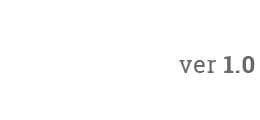
<style>
.page{position:relative;width:260px;height:120px;background:#ffffff}
.page>*{position:absolute;margin:0}
.t1{font:24px "RobotoSlab-Regular";letter-spacing:0.025em;color:#676a72}
.t2{font:24px "RobotoSlab-Bold";letter-spacing:0.025em;color:#676a72}
</style>
<div class="page">
<p class="t1" style="left:179px;top:56px;width:76px;height:17px">ver <span class="t2">1.0</span></p>
</div>
